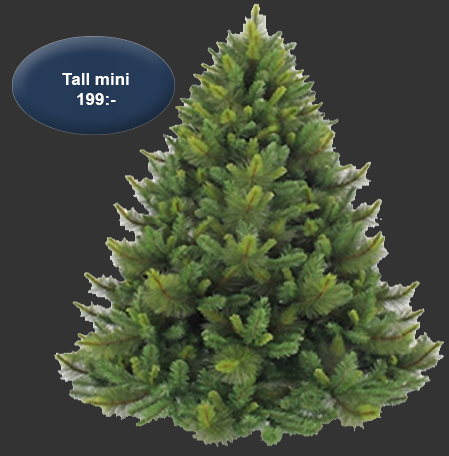
<style>
.page{position:relative;width:449px;height:456px;background:#333333}
.page>*{position:absolute;margin:0}
.t1{font:17px "Arial-BoldMT";color:#ffffff}
</style>
<div class="page">
<p class="t1" style="left:62px;top:73px;width:67px;height:32px;text-align:center">Tall mini <br>199:-</p>
</div>
